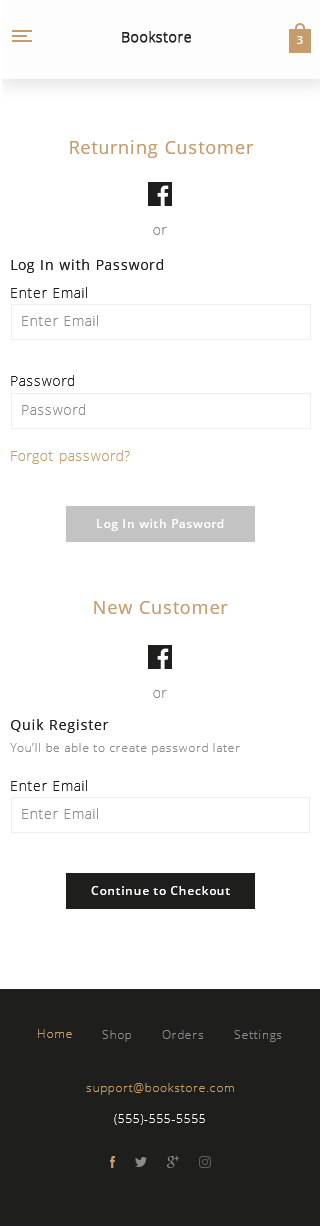
<style>
.page{position:relative;width:320px;height:1226px;background:#ffffff}
.page>*{position:absolute;margin:0}
.t1{font:18px "OpenSans";letter-spacing:0.05em;color:#c69c6d}
.t2{font:14px "OpenSans-Light";letter-spacing:0.05em;color:#8c8c8c}
.t3{font:14px "OpenSans";letter-spacing:0.05em;color:#1e1e1c}
.t4{font:14px "OpenSans-Light";letter-spacing:0.05em;color:#1e1e1c}
.t5{font:14px "OpenSans-Light";letter-spacing:0.05em;color:#c69c6d}
.t6{font:12px "OpenSans-Semibold";letter-spacing:0.05em;color:#fffefe}
.t7{font:12px "OpenSans-Light";letter-spacing:0.05em;color:#8c8c8c}
</style>
<div class="page">
<p class="t1" style="left:70px;top:140px;width:184px;height:18px">Returning Customer</p>
<p class="t2" style="left:153px;top:227px;width:14px;height:8px">or</p>
<p class="t3" style="left:11px;top:259px;width:152px;height:14px">Log In with Password</p>
<p class="t4" style="left:11px;top:287px;width:76px;height:11px">Enter Email</p>
<p class="t2" style="left:22px;top:315px;width:76px;height:11px">Enter Email</p>
<p class="t4" style="left:11px;top:375px;width:63px;height:11px">Password</p>
<p class="t2" style="left:22px;top:404px;width:63px;height:11px">Password</p>
<p class="t5" style="left:11px;top:450px;width:119px;height:14px">Forgot password?</p>
<p class="t6" style="left:97px;top:519px;width:127px;height:12px">Log In with Pasword</p>
<p class="t1" style="left:94px;top:601px;width:134px;height:13px">New Customer</p>
<p class="t2" style="left:153px;top:690px;width:14px;height:8px">or</p>
<p class="t3" style="left:11px;top:719px;width:98px;height:14px">Quik Register</p>
<p class="t7" style="left:10px;top:743px;width:230px;height:12px">You’ll be able to create password later</p>
<p class="t4" style="left:11px;top:780px;width:76px;height:11px">Enter Email</p>
<p class="t2" style="left:22px;top:808px;width:76px;height:11px">Enter Email</p>
<p class="t6" style="left:91px;top:886px;width:139px;height:9px">Continue to Checkout</p>
</div>
